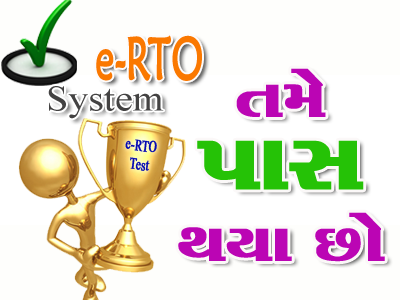
<style>
.page{position:relative;width:400px;height:300px;background:#fefefc}
.page>*{position:absolute;margin:0}
.t1{font:59.1px "MaiandraGD-Regular";color:#fa7800;font-weight:bold;scale:0.63 1}
.t2{font:68.6px/72px "Maruti";color:#bb05b4;font-weight:bold;scale:1.17 1}
.t3{font:100px/72px "Maruti";color:#25c206;font-weight:bold;scale:1.17 1}
.t4{font:36.3px "TimesNewRomanPSMT";color:#434242;scale:1.1 1}
.t5{font:15.8px "TimesNewRomanPSMT";color:#070bb2;font-weight:bold;scale:0.7 1}
</style>
<div class="page">
<p class="t1" style="left:96px;top:35px;width:106px;height:46px">e-RTO</p>
<p class="t2" style="left:178px;top:68px;width:207px;height:194px;text-align:center">ík{u<br><span class="t3">ÃkkMk <br></span>ÚkÞk Aku</p>
<p class="t4" style="left:48px;top:86px;width:116px;height:33px">System</p>
<p class="t5" style="left:125px;top:139px;width:32px;height:32px;text-align:center;rotate:7deg">e-RTO<br>Test</p>
</div>
